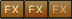
<style>
.page{position:relative;width:72px;height:19px}
.page>*{position:absolute;margin:0}
.t1{font:10px "HelveticaNeueLTStd-Roman";letter-spacing:0.2em;color:#efc38b}
.t2{font:10px "HelveticaNeueLTStd-Roman";letter-spacing:0.2em;color:#c9c877}
.t3{font:10px "HelveticaNeueLTStd-Roman";letter-spacing:0.2em;color:#c99c61}
</style>
<div class="page">
<p class="t1" style="left:5px;top:5px;width:14px;height:8px">FX</p>
<p class="t2" style="left:29px;top:5px;width:14px;height:8px">FX</p>
<p class="t3" style="left:53px;top:5px;width:14px;height:8px">FX</p>
</div>
